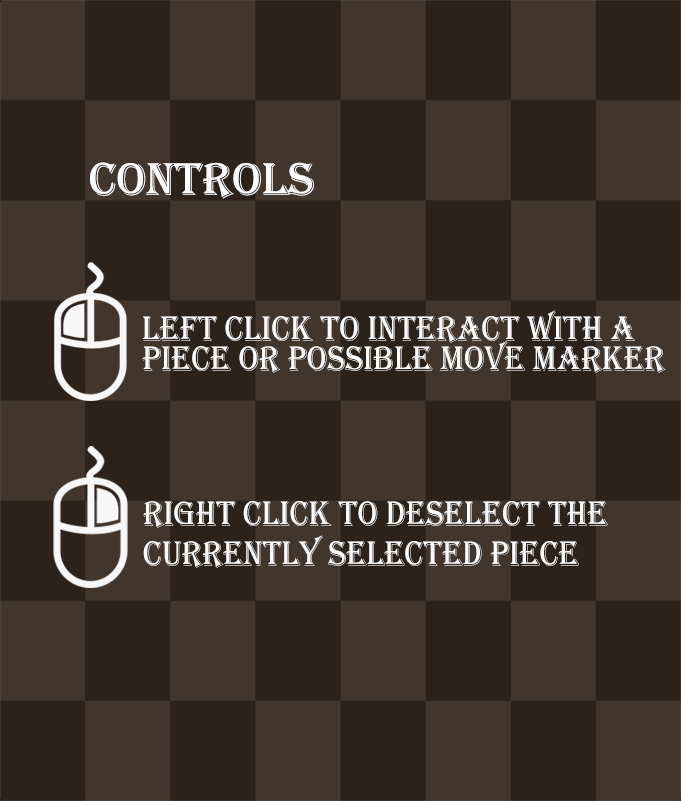
<style>
.page{position:relative;width:681px;height:801px;background:#41352c}
.page>*{position:absolute;margin:0}
.t1{font:47.5px "Algerian";color:#fffcfc}
.t2{font:36px/10px "Algerian";color:#fffcfc;scale:0.9 1}
</style>
<div class="page">
<p class="t1" style="left:90px;top:162px;width:224px;height:37px">Controls</p>
<p class="t2" style="left:142px;top:310px;width:524px;height:63px">Left click to interact with a <br><br><br>piece or possible move marker</p>
<p class="t2" style="left:143px;top:501px;width:465px;height:67px">Right click to deselect the <br><br><br><br>currently selected piece</p>
</div>
